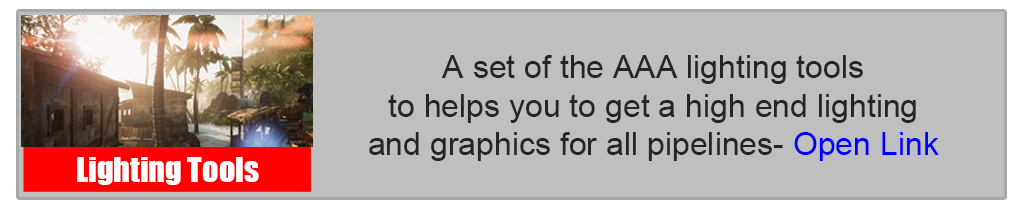
<style>
.page{position:relative;width:1024px;height:210px;background:#bfbfbf}
.page>*{position:absolute;margin:0}
.t1{font:32px "ArialMT";color:#252525}
.t2{font:32px "ArialMT";color:#0000ff}
.t3{font:32px "Impact";color:#ffffff}
</style>
<div class="page">
<p class="t1" style="left:369px;top:55px;width:570px;height:106px;text-align:center">A set of the AAA lighting tools<br>to helps you to get a high end lighting<br>and graphics for all pipelines- <span class="t2">Open Link</span></p>
<p class="t3" style="left:77px;top:157px;width:182px;height:28px">Lighting Tools</p>
</div>
